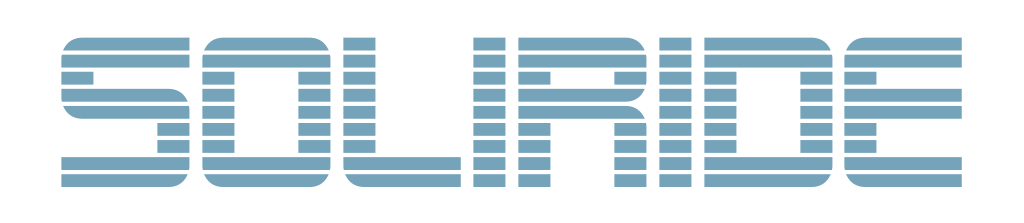
<style>
.page{position:relative;width:1024px;height:223px;background:#ffffff}
.page>*{position:absolute;margin:0}
.t1{font:213.3px "AlienEncounters";color:#75a4ba}
</style>
<div class="page">
<p class="t1" style="left:61px;top:37px;width:901px;height:150px">SOLIRIDE</p>
</div>
